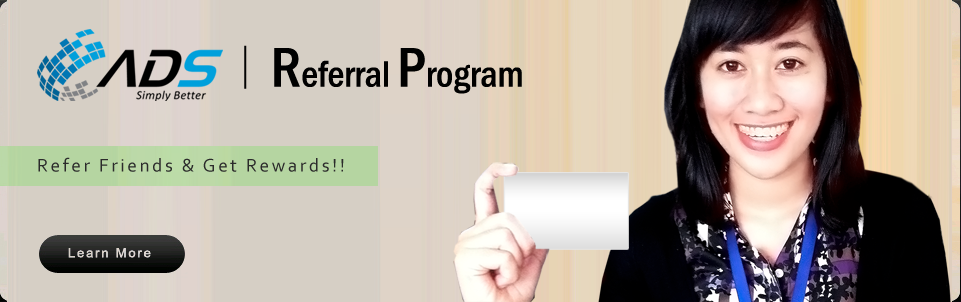
<style>
.page{position:relative;width:961px;height:302px;background:#d6cfc5}
.page>*{position:absolute;margin:0}
.t1{font:51.6px "FrenchScriptMT";color:#030303}
.t2{font:37.6px "FranklinGothic-MediumCond";color:#000000}
.t3{font:57.7px "FranklinGothic-MediumCond";color:#000000}
.t4{font:19px "Corbel";letter-spacing:0.14em;color:#2b2b2b}
</style>
<div class="page">
<p class="t1" style="left:244px;top:45px;width:3px;height:44px">|</p>
<p class="t2" style="left:274px;top:48px;width:248px;height:46px"><span class="t3"> R</span>eferral <span class="t3">P</span>rogram</p>
<p class="t4" style="left:38px;top:157px;width:306px;height:15px">Refer Friends &amp; Get Rewards!!</p>
</div>
